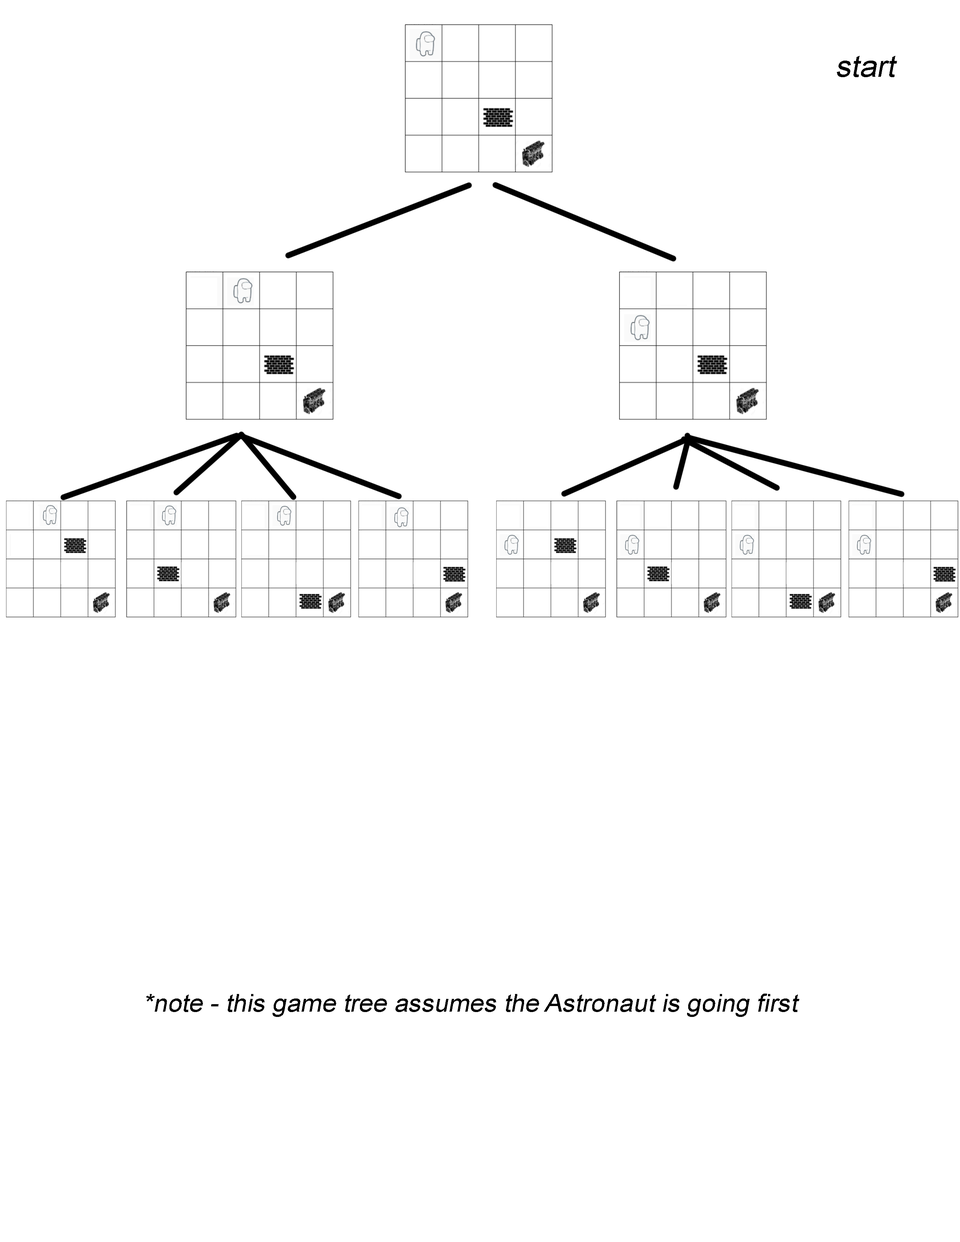
<style>
.page{position:relative;width:960px;height:1242px;background:#ffffff}
.page>*{position:absolute;margin:0}
.t1{font:29.8px "ArialMT";color:#000000;font-style:italic;scale:1.03 1}
.t2{font:24.9px "ArialMT";color:#000000;font-style:italic;scale:1.03 1}
</style>
<div class="page">
<p class="t1" style="left:837px;top:56px;width:60px;height:21px">start</p>
<p class="t2" style="left:146px;top:994px;width:653px;height:23px">*note - this game tree assumes the Astronaut is going first</p>
</div>
